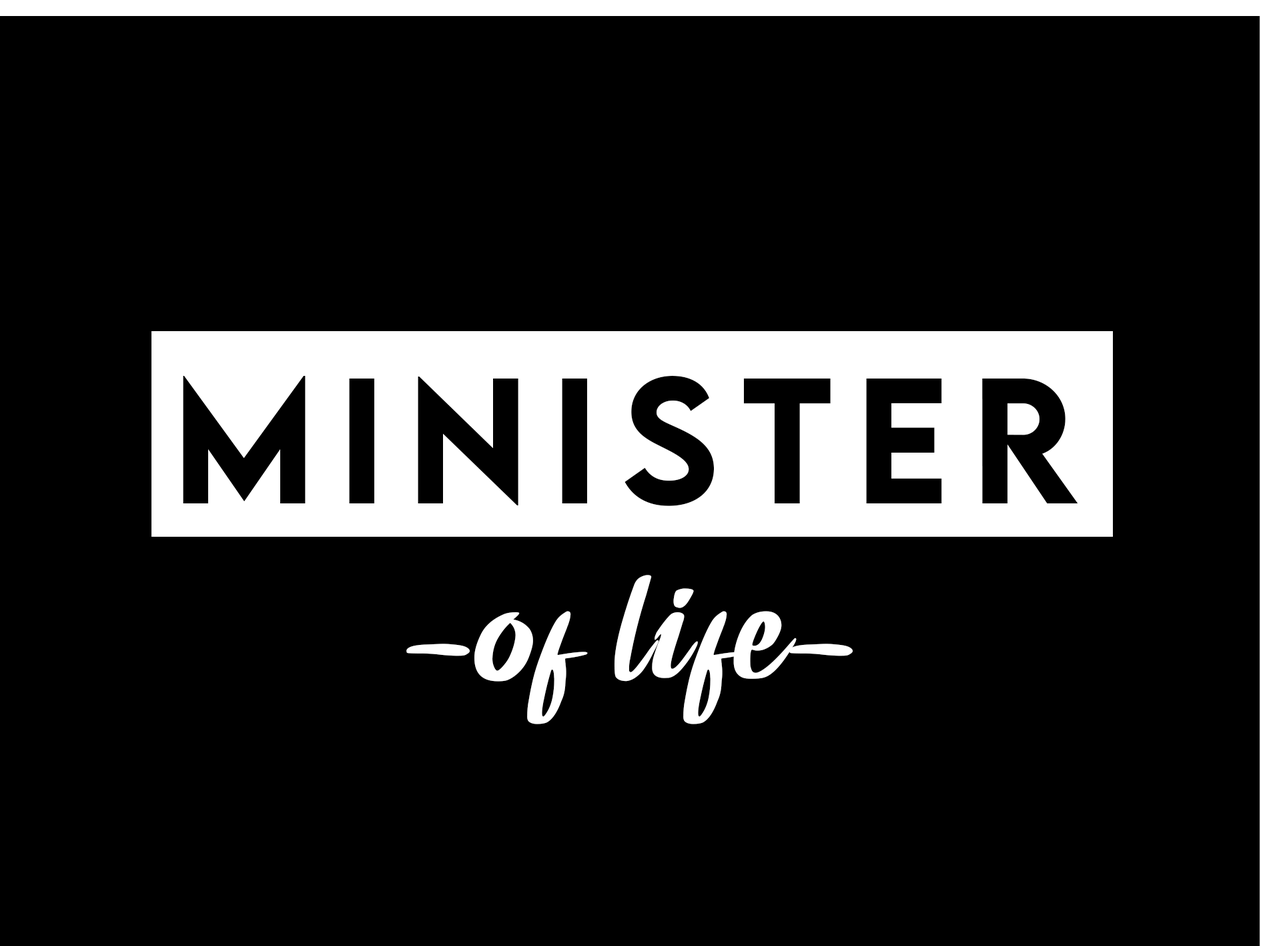
<style>
.page{position:relative;width:1261px;height:946px;background:#000000}
.page>*{position:absolute;margin:0}
.t1{font:158.5px "LEMONMILK-Medium";letter-spacing:0.14em;color:#000000}
.t2{font:191.8px "Quebecks";letter-spacing:0.02em;color:#ffffff}
</style>
<div class="page">
<p class="t1" style="left:183px;top:376px;width:895px;height:130px">MINISTER</p>
<p class="t2" style="left:406px;top:575px;width:447px;height:149px">-of life-</p>
</div>
